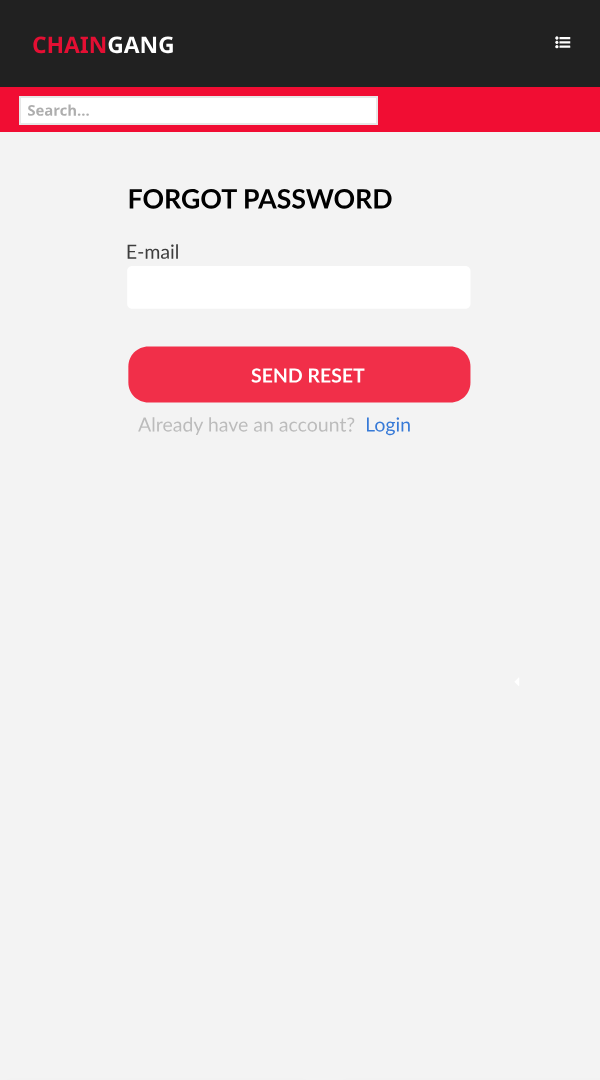
<style>
.page{position:relative;width:600px;height:1080px;background:#f3f3f3}
.page>*{position:absolute;margin:0}
.t1{font:22.8px "NotoSans-Bold";color:#e40f33}
.t2{font:22.8px "NotoSans-Bold";color:#ffffff}
.t3{font:14.8px "NotoSans-Bold";color:#aeaeae}
.t4{font:26.7px "Lato-Bold";color:#000000;text-transform:uppercase}
.t5{font:19.5px "Lato-Regular";color:#3d3d3d}
.t6{font:19.5px "Lato-Bold";color:#ffffff;text-transform:uppercase}
.t7{font:19.5px "Lato-Regular";color:#bcbcbc}
.t8{font:19.5px "Lato-Regular";color:#377ad7}
</style>
<div class="page">
<p class="t1" style="left:33px;top:36px;width:140px;height:18px">CHAIN<span class="t2">GANG</span></p>
<p class="t3" style="left:28px;top:104px;width:61px;height:12px">Search...</p>
<p class="t4" style="left:129px;top:188px;width:263px;height:21px">Forgot Password</p>
<p class="t5" style="left:127px;top:244px;width:51px;height:15px">E-mail</p>
<p class="t6" style="left:251px;top:368px;width:114px;height:15px">Send Reset</p>
<p class="t7" style="left:138px;top:417px;width:272px;height:19px">Already have an account?  <span class="t8">Login</span></p>
</div>
